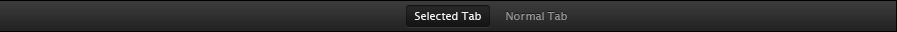
<style>
.page{position:relative;width:897px;height:32px}
.page>*{position:absolute;margin:0}
.t1{font:11px "LucidaGrande";color:#f2f2f2}
.t2{font:11px "LucidaGrande";color:#959595}
</style>
<div class="page">
<p class="t1" style="left:414px;top:12px;width:67px;height:8px">Selected Tab</p>
<p class="t2" style="left:506px;top:12px;width:61px;height:8px">Normal Tab</p>
</div>
